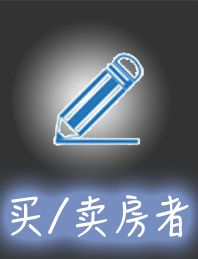
<style>
.page{position:relative;width:198px;height:259px;background:#333333}
.page>*{position:absolute;margin:0}
.t1{font:40.3px "HanziPenSC-W5";color:#ffffff}
</style>
<div class="page">
<p class="t1" style="left:11px;top:195px;width:178px;height:42px">买/卖房者</p>
</div>
